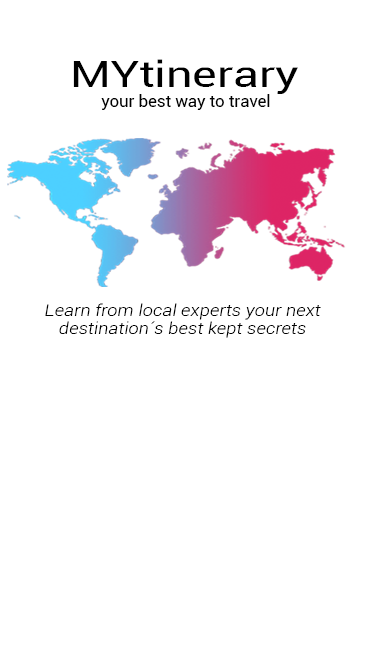
<style>
.page{position:relative;width:370px;height:667px;background:#ffffff}
.page>*{position:absolute;margin:0}
.t1{font:37.5px "Roboto-Regular";color:#000000;scale:1.24 1}
.t2{font:16.7px "Roboto-Regular";color:#000000}
.t3{font:15.6px "Roboto-LightItalic";color:#000000;scale:1.18 1}
</style>
<div class="page">
<p class="t1" style="left:73px;top:59px;width:225px;height:35px">MYtinerary</p>
<p class="t2" style="left:101px;top:94px;width:169px;height:16px">your best way to travel</p>
<p class="t3" style="left:45px;top:303px;width:276px;height:35px;text-align:center">Learn from local experts your next<br>destination´s best kept secrets</p>
</div>
